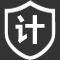
<style>
.page{position:relative;width:60px;height:60px;background:#333333}
.page>*{position:absolute;margin:0}
.t1{font:30px "MicrosoftYaHei-Bold";color:#ffffff}
</style>
<div class="page">
<p class="t1" style="left:15px;top:15px;width:30px;height:29px">计</p>
</div>
